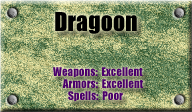
<style>
.page{position:relative;width:192px;height:112px}
.page>*{position:absolute;margin:0}
.t1{font:24px "Impact";color:#000000}
.t2{font:11px "Impact";color:#4a006c}
</style>
<div class="page">
<p class="t1" style="left:55px;top:12px;width:82px;height:22px">Dragoon</p>
<p class="t2" style="left:53px;top:67px;width:90px;height:10px">Weapons:  Excellent</p>
<p class="t2" style="left:62px;top:79px;width:81px;height:9px">Armors:  Excellent</p>
<p class="t2" style="left:68px;top:91px;width:55px;height:10px">Spells:  Poor</p>
</div>
